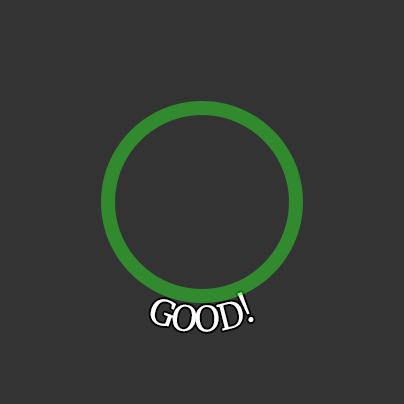
<style>
.page{position:relative;width:404px;height:404px;background:#333333}
.page>*{position:absolute;margin:0}
.t1{font:35px "Merriweather-Regular";color:#ffffff}
</style>
<div class="page">
<p class="t1" style="left:150px;top:292px;width:104px;height:40px">GOOD!</p>
</div>
